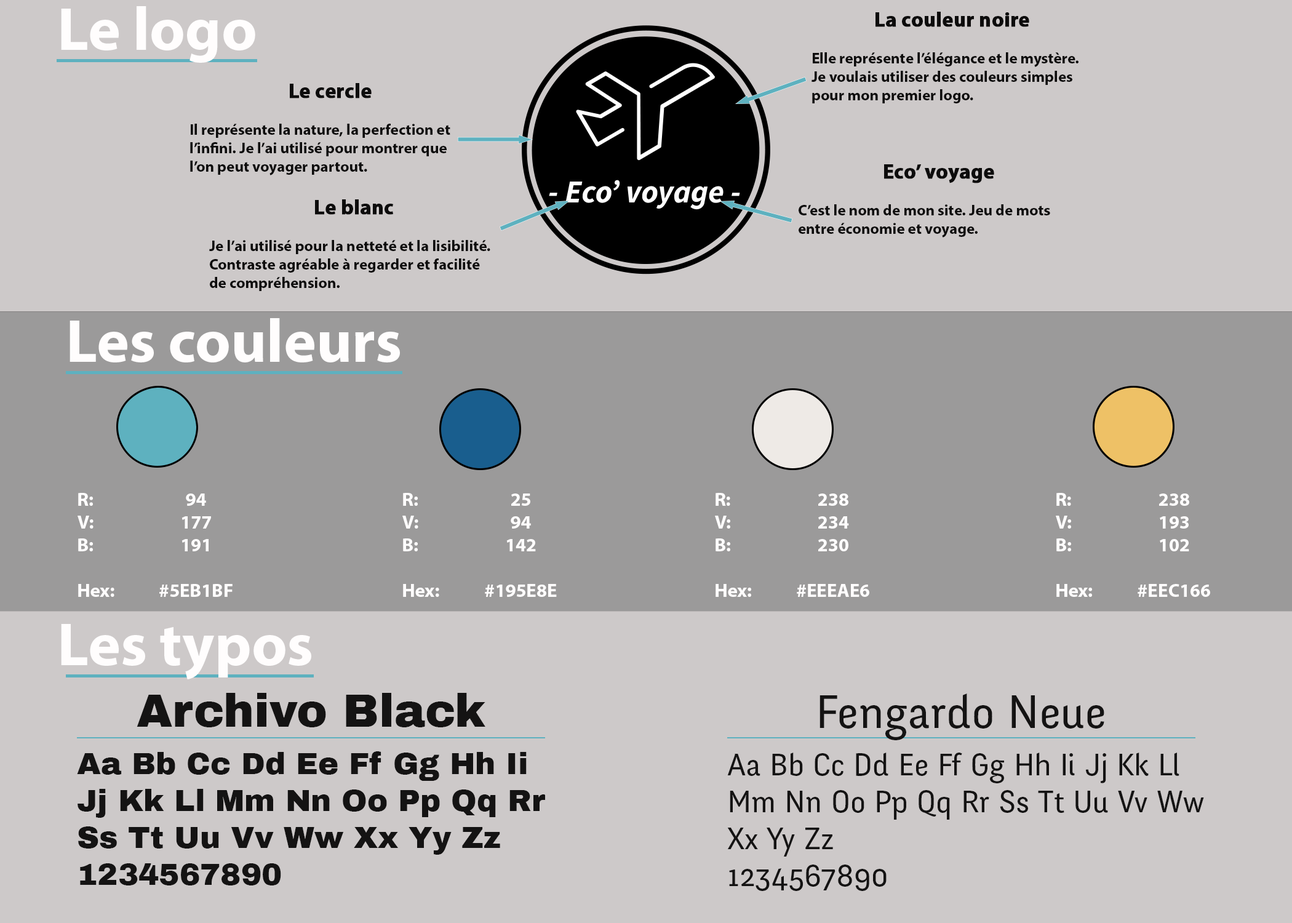
<style>
.page{position:relative;width:1292px;height:923px;background:#cdc9c9}
.page>*{position:absolute;margin:0}
.t1{font:61.5px "MyriadPro-Bold";color:#fffdfd}
.t2{font:15.4px "MyriadPro-Bold";color:#0d0c0c}
.t3{font:20.5px "MyriadPro-Bold";color:#0d0c0c;font-weight:bold}
.t4{font:18.9px "MyriadPro-Bold";color:#fffdfd}
.t5{font:46.1px "ArchivoBlack-Regular";color:#141313}
.t6{font:46.1px "FengardoNeue";color:#141313}
.t7{font:30.8px "ArchivoBlack-Regular";color:#141313}
.t8{font:30.8px "FengardoNeue";color:#141313}
</style>
<div class="page">
<p class="t1" style="left:61px;top:6px;width:194px;height:57px">Le logo</p>
<p class="t2" style="left:812px;top:12px;width:267px;height:91px;text-align:center"><span class="t3">La couleur noire<br></span><br>Elle représente l’élégance et le mystère.<br>Je voulais utiliser des couleurs simples pour mon premier logo.</p>
<p class="t2" style="left:190px;top:83px;width:260px;height:92px;text-align:center"><span class="t3">Le cercle<br></span><br>Il représente la nature, la perfection et l’infini. Je l’ai utilisé pour montrer que l’on peut voyager partout.</p>
<p class="t2" style="left:799px;top:164px;width:251px;height:73px;text-align:center"><span class="t3">Eco’ voyage<br></span><br>C’est le nom de mon site. Jeu de mots entre économie et voyage.</p>
<p class="t2" style="left:209px;top:199px;width:281px;height:92px;text-align:center"><span class="t3">Le blanc<br></span><br>Je l’ai utilisé pour la netteté et la lisibilité. Contraste agréable à regarder et facilité de compréhension.</p>
<p class="t1" style="left:70px;top:318px;width:330px;height:44px">Les couleurs</p>
<p class="t4" style="left:78px;top:493px;width:36px;height:104px">R:<br>V:<br>B:<br><br>Hex:</p>
<p class="t4" style="left:159px;top:493px;width:74px;height:104px;text-align:center">94<br>177<br>191<br><br>#5EB1BF</p>
<p class="t4" style="left:402px;top:493px;width:37px;height:104px">R:<br>V:<br>B:<br><br>Hex:</p>
<p class="t4" style="left:485px;top:493px;width:72px;height:104px;text-align:center">25<br>94<br>142<br><br>#195E8E</p>
<p class="t4" style="left:715px;top:493px;width:36px;height:104px">R:<br>V:<br>B:<br><br>Hex:</p>
<p class="t4" style="left:797px;top:493px;width:72px;height:104px;text-align:center">238<br>234<br>230<br><br>#EEEAE6</p>
<p class="t4" style="left:1056px;top:493px;width:36px;height:104px">R:<br>V:<br>B:<br><br>Hex:</p>
<p class="t4" style="left:1138px;top:493px;width:72px;height:104px;text-align:center">238<br>193<br>102<br><br>#EEC166</p>
<p class="t1" style="left:61px;top:624px;width:250px;height:55px">Les typos</p>
<p class="t5" style="left:137px;top:693px;width:348px;height:34px">Archivo Black</p>
<p class="t6" style="left:820px;top:693px;width:284px;height:47px">Fengardo Neue</p>
<p class="t7" style="left:77px;top:751px;width:468px;height:134px">Aa Bb Cc Dd Ee Ff Gg Hh Ii Jj Kk Ll Mm Nn Oo Pp Qq Rr Ss Tt Uu Vv Ww Xx Yy Zz <br>1234567890</p>
<p class="t8" style="left:727px;top:752px;width:477px;height:139px">Aa Bb Cc Dd Ee Ff Gg Hh Ii Jj Kk Ll Mm Nn Oo Pp Qq Rr Ss Tt Uu Vv Ww Xx Yy Zz <br>1234567890</p>
</div>
